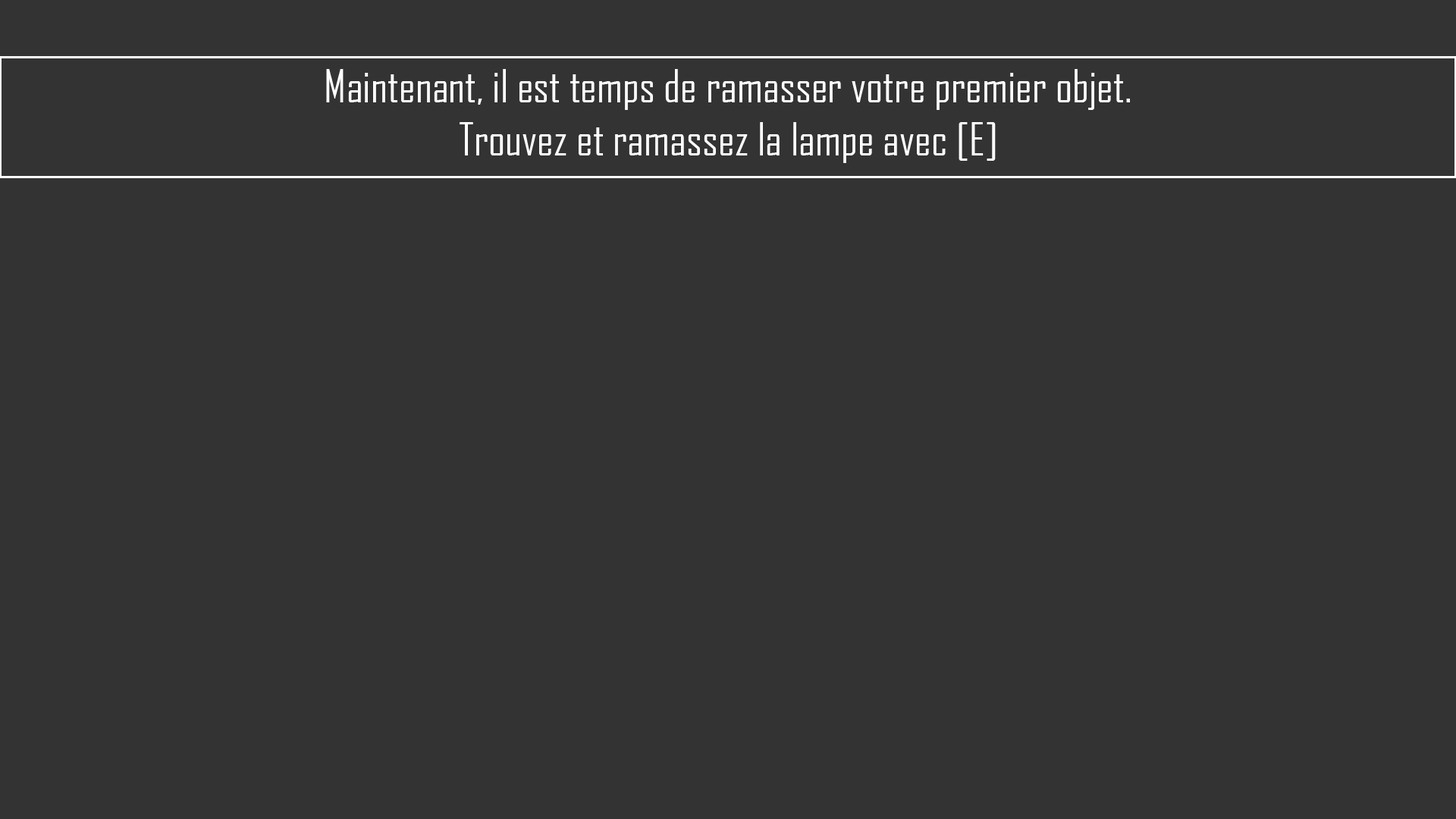
<style>
.page{position:relative;width:1456px;height:819px;background:#333333}
.page>*{position:absolute;margin:0}
.t1{font:44.2px "AgencyFB-Reg";color:#ffffff}
</style>
<div class="page">
<p class="t1" style="left:326px;top:69px;width:804px;height:94px;text-align:center">Maintenant, il est temps de ramasser votre premier objet.<br>Trouvez et ramassez la lampe avec [E]</p>
</div>
